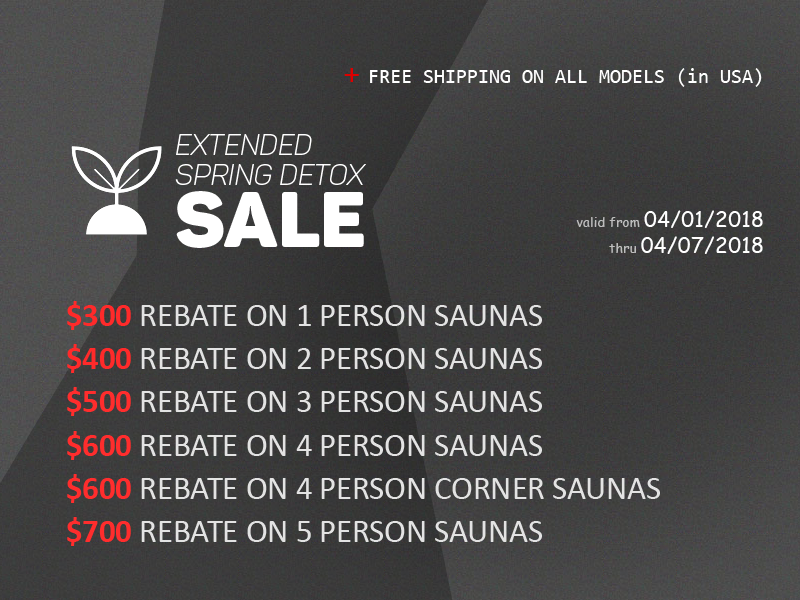
<style>
.page{position:relative;width:800px;height:600px}
.page>*{position:absolute;margin:0}
.t1{font:20px "Consolas";color:#ffffff}
.t2{font:30px "Consolas";color:#dd0000}
.t3{font:28.4px/30px "Panton-LightitalicCaps";color:#ffffff}
.t4{font:77.5px/62px "Panton-BlackCaps";color:#ffffff}
.t5{font:13.4px/12.5px "ComicSansMS";color:#bebebe}
.t6{font:21.5px/12.5px "ComicSansMS";color:#ffffff}
.t7{font:32.5px/21.7px "Calibri";color:#e3e3e3}
.t8{font:32.5px/21.7px "Calibri-Bold";color:#ff2a2a}
.t9{font:32.5px/21.7px "Calibri-Bold";color:#ff2d2d}
</style>
<div class="page">
<p class="t1" style="left:344px;top:68px;width:418px;height:19px"><span class="t2">+ </span>FREE SHIPPING ON ALL MODELS (in USA)</p>
<p class="t3" style="left:175px;top:134px;width:191px;height:114px">EXTENDED<br>Spring Detox<br><span class="t4">SALE</span></p>
<p class="t5" style="left:576px;top:210px;width:187px;height:44px;text-align:right">valid from <span class="t6">04/01/2018<br><br></span>thru <span class="t6">04/07/2018</span></p>
<p class="t7" style="left:67px;top:301px;width:593px;height:245px"><span class="t8">$300 </span>REBATE ON 1 PERSON SAUNAS<br><span class="t8"><br>$400 </span>REBATE ON 2 PERSON SAUNAS<br><br><span class="t9">$500 </span>REBATE ON 3 PERSON SAUNAS<br><br><span class="t9">$600 </span>REBATE ON 4 PERSON SAUNAS<br><br><span class="t9">$600 </span>REBATE ON 4 PERSON CORNER SAUNAS<br><br><span class="t9">$700 </span>REBATE ON 5 PERSON SAUNAS</p>
</div>
